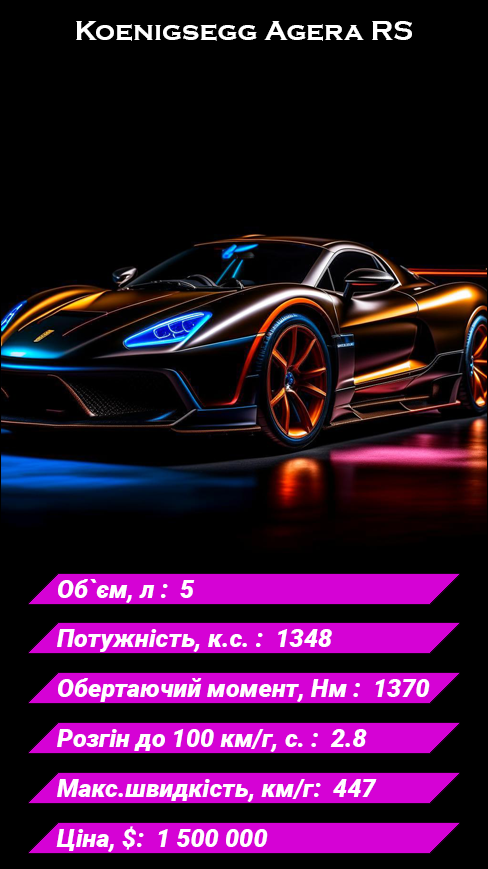
<style>
.page{position:relative;width:488px;height:869px;background:#000000}
.page>*{position:absolute;margin:0}
.t1{font:28px "CopperplateGothic-Bold";color:#ffffff}
.t2{font:25px "Roboto-BlackItalic";color:#ffffff}
</style>
<div class="page">
<p class="t1" style="left:76px;top:21px;width:336px;height:20px">Koenigsegg Agera RS</p>
<p class="t2" style="left:58px;top:579px;width:137px;height:24px">Об`єм, л :  5</p>
<p class="t2" style="left:57px;top:629px;width:275px;height:23px">Потужність, к.с. :  1348</p>
<p class="t2" style="left:58px;top:678px;width:372px;height:24px">Обертаючий момент, Нм :  1370</p>
<p class="t2" style="left:57px;top:729px;width:310px;height:23px">Розгін до 100 км/г, с. :  2.8</p>
<p class="t2" style="left:57px;top:779px;width:320px;height:23px">Макс.швидкість, км/г:  447</p>
<p class="t2" style="left:56px;top:826px;width:212px;height:26px">Ціна, $:  1 500 000</p>
</div>
